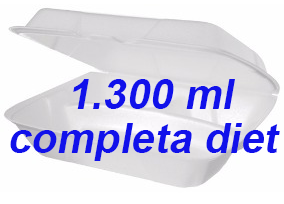
<style>
.page{position:relative;width:284px;height:204px;background:#fefefe}
.page>*{position:absolute;margin:0}
.t1{font:72px "Arial-BoldMT";color:#1111ea;font-style:italic}
</style>
<div class="page">
<p class="t1" style="left:73px;top:79px;width:162px;height:30px">1.300 ml</p>
<p class="t1" style="left:10px;top:123px;width:270px;height:38px">completa diet</p>
</div>
